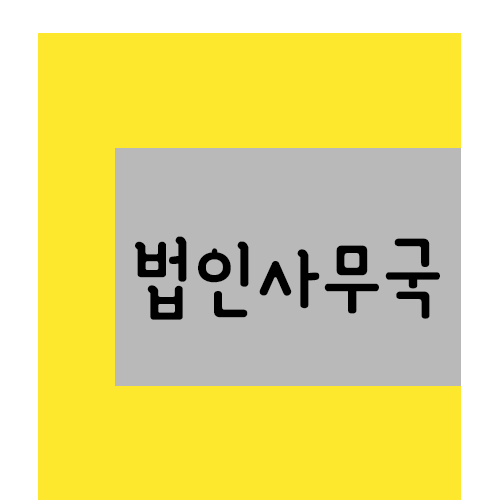
<style>
.page{position:relative;width:500px;height:500px;background:#fee82d}
.page>*{position:absolute;margin:0}
.t1{font:100px "YanoljaYacheR";color:#000000}
</style>
<div class="page">
<p class="t1" style="left:135px;top:236px;width:305px;height:84px">법인사무국</p>
</div>
